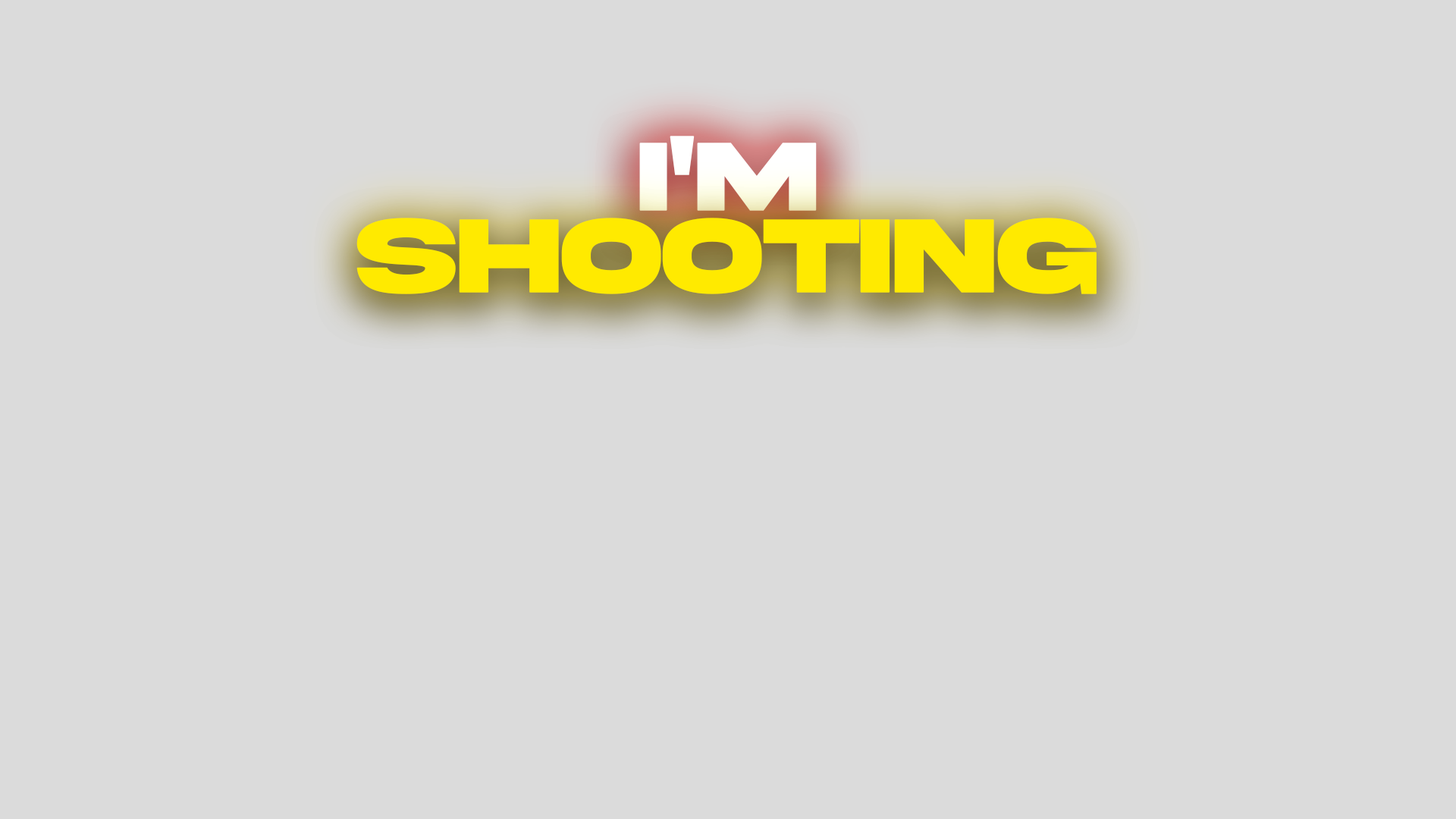
<style>
.page{position:relative;width:1456px;height:819px;background:#dbdbdb}
.page>*{position:absolute;margin:0}
.t1{font:102.1px "AkiraExpanded-SuperBold";color:#ffffff;font-weight:bold}
.t2{font:109.5px "AkiraExpanded-SuperBold";color:#ffea00;font-weight:bold}
</style>
<div class="page">
<p class="t1" style="left:639px;top:136px;width:178px;height:75px">i'm</p>
<p class="t2" style="left:356px;top:218px;width:741px;height:76px">SHOOTING</p>
</div>
